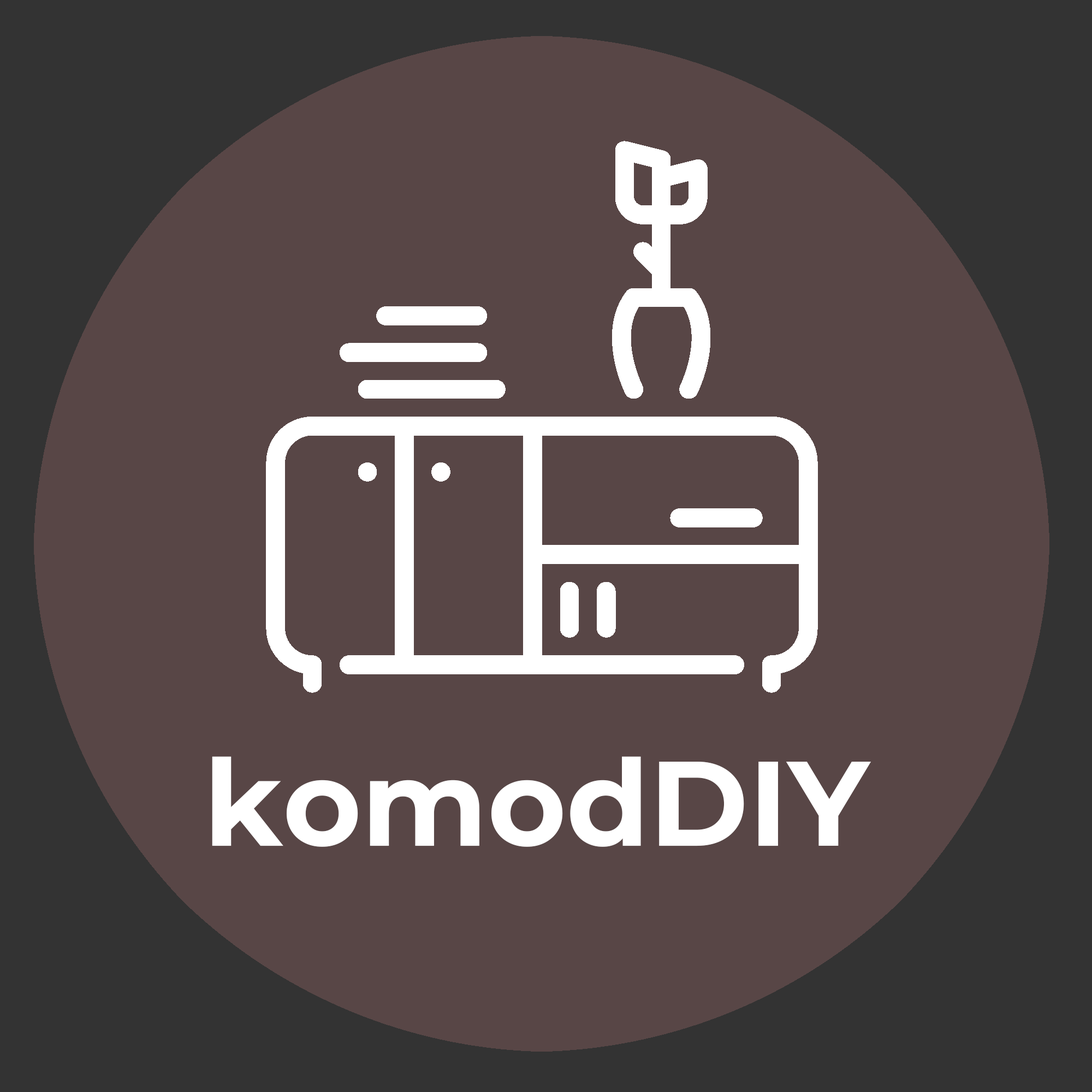
<style>
.page{position:relative;width:1092px;height:1092px;background:#584646}
.page>*{position:absolute;margin:0}
.t1{font:120.1px "Montserrat-Bold";color:#ffffff}
</style>
<div class="page">
<p class="t1" style="left:212px;top:756px;width:659px;height:91px">komodDIY</p>
</div>
